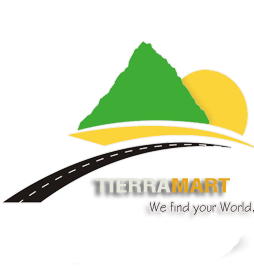
<style>
.page{position:relative;width:254px;height:268px;background:#ffffff}
.page>*{position:absolute;margin:0}
.t1{font:18.9px "Swiss721BT-BoldCondensed";color:#e4e4d8;scale:1.34 1}
.t2{font:18.9px "Swiss721BT-BoldCondensed";color:#e4a111;scale:1.34 1}
.t3{font:14px "StylusBT";scale:0.87 1}
</style>
<div class="page">
<p class="t1" style="left:96px;top:178px;width:134px;height:15px;opacity:0.94">TIERRA<span class="t2">MART</span></p>
<p class="t3" style="left:150px;top:202px;width:104px;height:13px">We find your World.</p>
</div>
